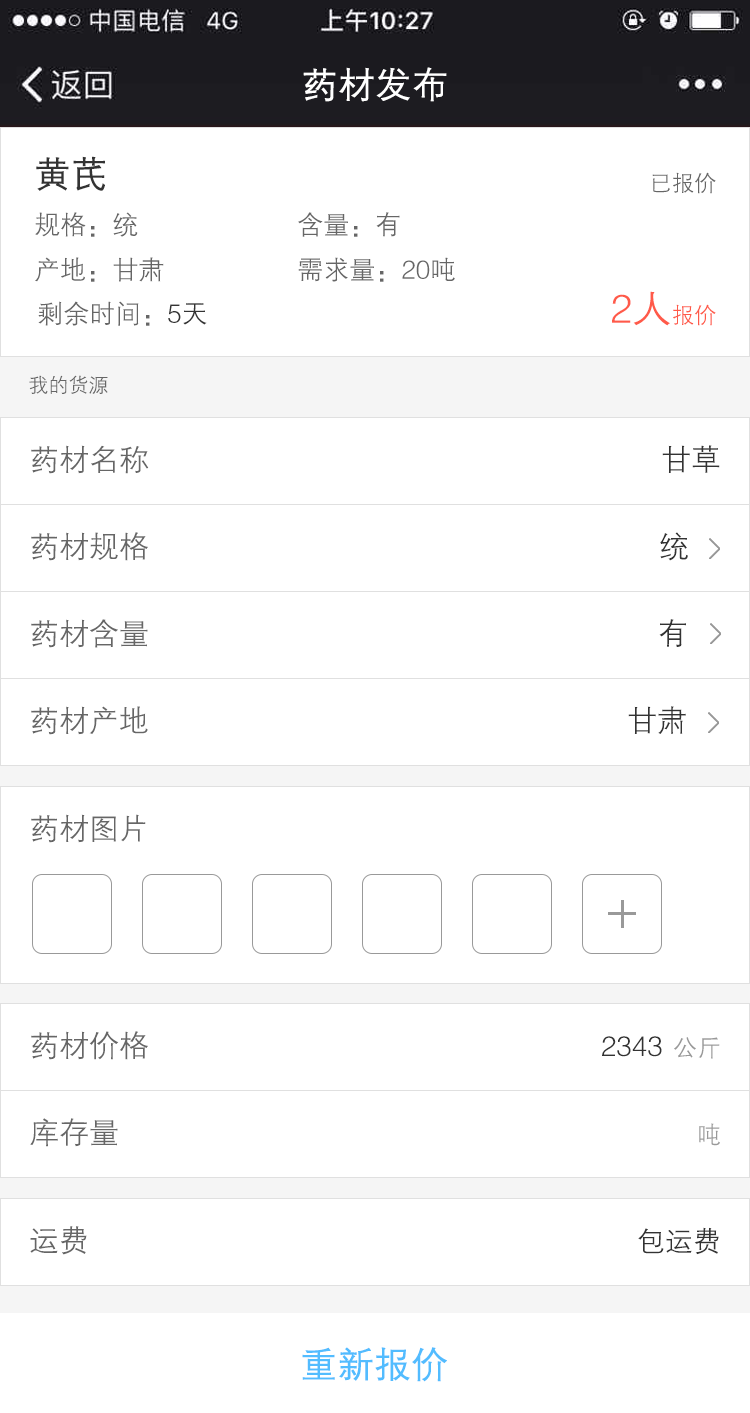
<style>
.page{position:relative;width:750px;height:1413px;background:#ffffff}
.page>*{position:absolute;margin:0}
.t1{font:36px "FZZDXJW--GB1-0";color:#ffffff;font-weight:bold}
.t2{font:36px "FZZDXJW--GB1-0";color:#333333;font-weight:bold}
.t3{font:22px "FZZDXJW--GB1-0";color:#666666}
.t4{font:26px "FZZDXJW--GB1-0";color:#666666}
.t5{font:40px "FZZDXJW--GB1-0";color:#ff5a49}
.t6{font:22px "FZZDXJW--GB1-0";color:#ff5a49}
.t7{font:26px "FZZDXJW--GB1-0";color:#333333}
.t8{font:20px "FZZDXJW--GB1-0";color:#666666}
.t9{font:30px "FZZDXJW--GB1-0";color:#666666}
.t10{font:30px "FZZDXJW--GB1-0";color:#333333}
.t11{font:28px "FZZDXJW--GB1-0";color:#333333}
.t12{font:24px "FZZDXJW--GB1-0";color:#999999}
.t13{font:36px "FZZDXJW--GB1-0";color:#52bcff;font-weight:bold}
</style>
<div class="page">
<p class="t1" style="left:303px;top:67px;width:144px;height:35px">药材发布</p>
<p class="t2" style="left:36px;top:156px;width:69px;height:35px">黄芪</p>
<p class="t3" style="left:652px;top:172px;width:64px;height:22px">已报价</p>
<p class="t4" style="left:35px;top:212px;width:103px;height:25px">规格：统</p>
<p class="t4" style="left:298px;top:212px;width:102px;height:25px">含量：有</p>
<p class="t4" style="left:35px;top:257px;width:129px;height:25px">产地：甘肃</p>
<p class="t4" style="left:298px;top:257px;width:157px;height:25px">需求量：20吨</p>
<p class="t5" style="left:612px;top:291px;width:104px;height:35px">2人<span class="t6">报价</span></p>
<p class="t4" style="left:38px;top:301px;width:169px;height:25px">剩余时间：<span class="t7">5天</span></p>
<p class="t8" style="left:29px;top:375px;width:79px;height:19px">我的货源</p>
<p class="t9" style="left:31px;top:445px;width:118px;height:29px">药材名称</p>
<p class="t10" style="left:662px;top:445px;width:58px;height:28px">甘草</p>
<p class="t9" style="left:31px;top:532px;width:117px;height:29px">药材规格</p>
<p class="t10" style="left:660px;top:532px;width:28px;height:29px">统</p>
<p class="t9" style="left:31px;top:619px;width:117px;height:29px">药材含量</p>
<p class="t10" style="left:659px;top:619px;width:27px;height:28px">有</p>
<p class="t9" style="left:31px;top:706px;width:117px;height:29px">药材产地</p>
<p class="t10" style="left:628px;top:706px;width:58px;height:28px">甘肃</p>
<p class="t9" style="left:31px;top:814px;width:115px;height:29px">药材图片</p>
<p class="t9" style="left:31px;top:1031px;width:117px;height:29px">药材价格</p>
<p class="t11" style="left:602px;top:1036px;width:60px;height:21px">2343</p>
<p class="t12" style="left:674px;top:1037px;width:46px;height:22px">公斤</p>
<p class="t9" style="left:30px;top:1118px;width:88px;height:29px">库存量</p>
<p class="t12" style="left:699px;top:1123px;width:21px;height:23px">吨</p>
<p class="t9" style="left:30px;top:1226px;width:57px;height:29px">运费</p>
<p class="t11" style="left:638px;top:1227px;width:81px;height:28px">包运费</p>
<p class="t13" style="left:302px;top:1347px;width:145px;height:35px">重新报价</p>
</div>
